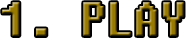
<style>
.page{position:relative;width:186px;height:38px;background:#ffffff}
.page>*{position:absolute;margin:0}
.t1{font:48px "Fixedsys";scale:0.9 1}
</style>
<div class="page">
<p class="t1" style="left:2px;top:2px;width:182px;height:34px">1. PLAY</p>
</div>
